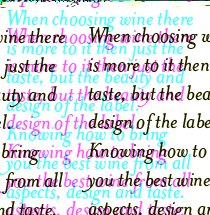
<style>
.page{position:relative;width:210px;height:215px;background:#ffffff}
.page>*{position:absolute;margin:0}
.t1{font:24px "MrsEavesItalic"}
</style>
<div class="page">
<p class="t1" style="left:0px;top:9px;width:193px;height:195px">When choosing wine there <br>is more to it then just the <br>taste, but the beauty and <br>design of the label. <br>Knowing how to bring <br>you the best wine from all <br>aspects, design and taste.</p>
</div>
